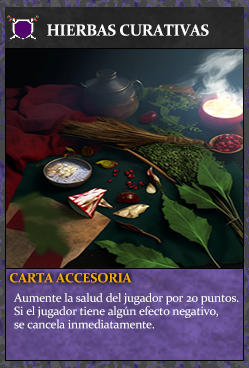
<style>
.page{position:relative;width:249px;height:368px}
.page>*{position:absolute;margin:0}
.t1{font:16px "Constantia-Bold";letter-spacing:-0.02em;color:#ffffff}
.t2{font:13.3px "Constantia-Bold";letter-spacing:-0.02em;color:#f2ac05}
.t3{font:12px/13.3px "Constantia";letter-spacing:-0.02em;color:#ffffff}
</style>
<div class="page">
<p class="t1" style="left:47px;top:24px;width:162px;height:12px">HIERBAS CURATIVAS</p>
<p class="t2" style="left:10px;top:273px;width:122px;height:10px">CARTA ACCESORIA</p>
<p class="t3" style="left:13px;top:293px;width:226px;height:36px">Aumente la salud del jugador por 20 puntos.<br>Si el jugador tiene algún efecto negativo,<br>se cancela inmediatamente.</p>
</div>
